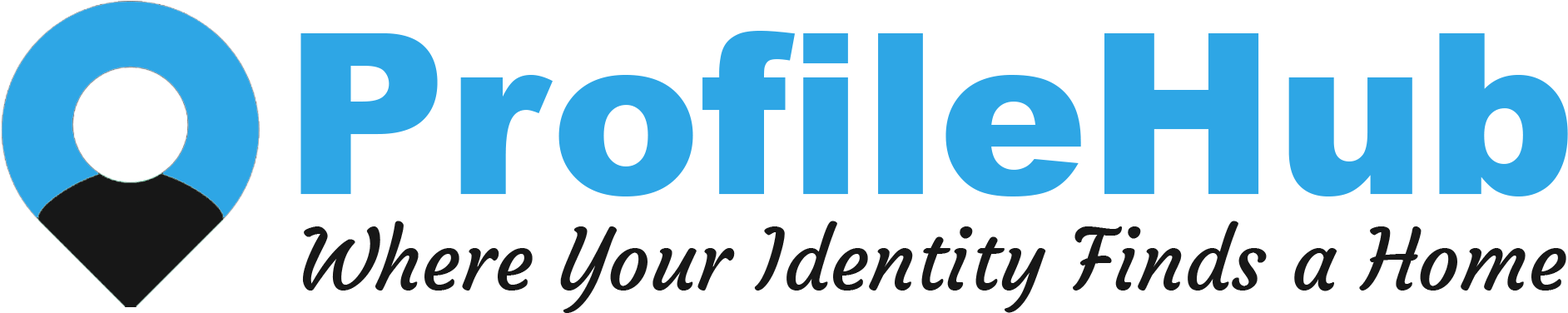
<style>
.page{position:relative;width:1568px;height:313px;background:#ffffff}
.page>*{position:absolute;margin:0}
.t1{font:224.9px "Arial-Black";color:#2ea6e5}
.t2{font:83.2px "Courgette-Regular";color:#171717}
</style>
<div class="page">
<p class="t1" style="left:300px;top:31px;width:1268px;height:165px">ProfileHub</p>
<p class="t2" style="left:302px;top:221px;width:1264px;height:92px">Where Your Identity Finds a Home</p>
</div>
